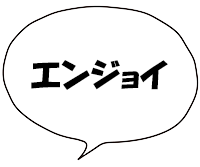
<style>
.page{position:relative;width:200px;height:167px;background:#ffffff}
.page>*{position:absolute;margin:0}
.t1{font:33.3px "HGPSoeiKakupoptai";color:#000000}
</style>
<div class="page">
<p class="t1" style="left:31px;top:59px;width:137px;height:31px">エンジョイ</p>
</div>
